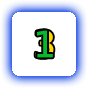
<style>
.page{position:relative;width:88px;height:88px;background:#ffffff}
.page>*{position:absolute;margin:0}
.t1{font:36px "BitstreamVeraSans-Roman";letter-spacing:0.012em}
.t2{font:36px "BitstreamVeraSans-Roman";letter-spacing:0.012em;color:#04ba2a}
</style>
<div class="page">
<p class="t1" style="left:35px;top:30px;width:19px;height:28px">3</p>
<p class="t2" style="left:37px;top:30px;width:16px;height:28px">1</p>
</div>
